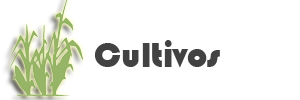
<style>
.page{position:relative;width:300px;height:100px;background:#ffffff}
.page>*{position:absolute;margin:0}
.t1{font:36px "Bauhaus93";color:#424242}
</style>
<div class="page">
<p class="t1" style="left:95px;top:40px;width:125px;height:28px">Cultivos</p>
</div>
